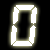
<style>
.page{position:relative;width:50px;height:50px;background:#000000}
.page>*{position:absolute;margin:0}
.t1{font:55px "LiquidCrystal";color:#ffffff}
</style>
<div class="page">
<p class="t1" style="left:11px;top:5px;width:26px;height:41px">0</p>
</div>
